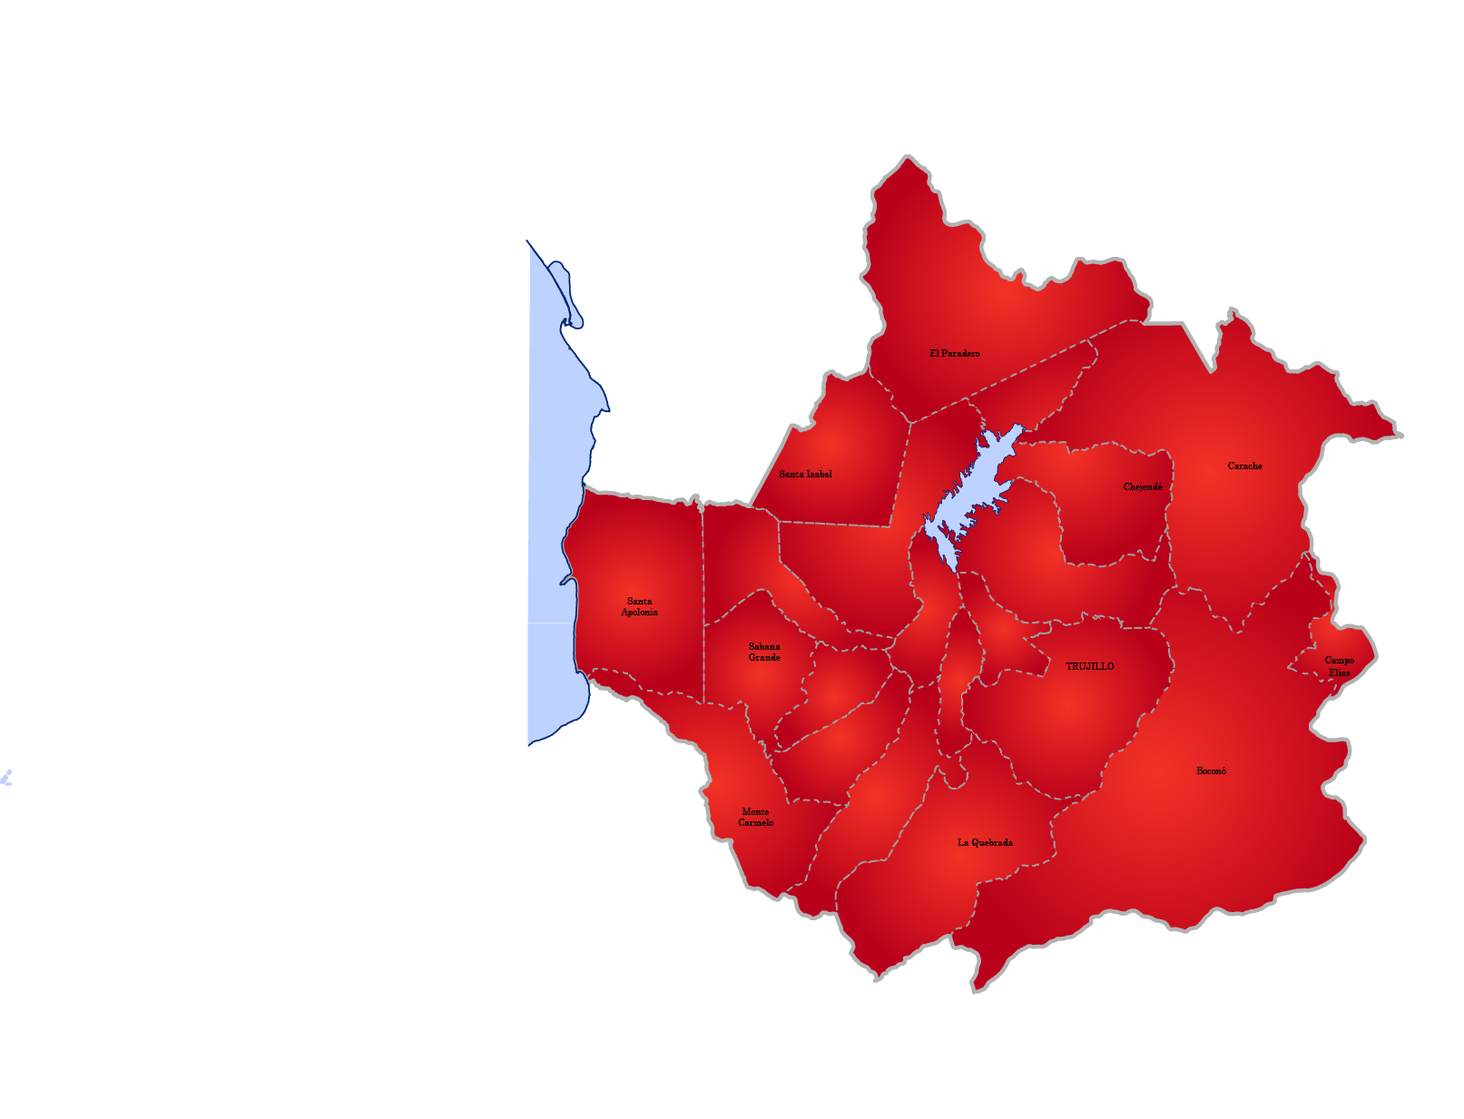
<style>
.page{position:relative;width:1464px;height:1119px;background:#ffffff}
.page>*{position:absolute;margin:0}
.t1{font:9px "CenturySchoolbook";color:#000000}
</style>
<div class="page">
<p class="t1" style="left:930px;top:350px;width:50px;height:7px">El Paradero</p>
<p class="t1" style="left:780px;top:470px;width:52px;height:8px">Santa Isabel</p>
<p class="t1" style="left:1228px;top:462px;width:35px;height:7px">Carache</p>
<p class="t1" style="left:1124px;top:483px;width:39px;height:9px">Chejendé</p>
<p class="t1" style="left:627px;top:597px;width:26px;height:8px">Santa</p>
<p class="t1" style="left:621px;top:608px;width:37px;height:9px">Apolonia</p>
<p class="t1" style="left:749px;top:643px;width:32px;height:7px">Sabana</p>
<p class="t1" style="left:749px;top:654px;width:32px;height:7px">Grande</p>
<p class="t1" style="left:1066px;top:663px;width:49px;height:7px">TRUJILLO</p>
<p class="t1" style="left:1325px;top:656px;width:29px;height:9px">Campo</p>
<p class="t1" style="left:1329px;top:669px;width:22px;height:7px">Elías</p>
<p class="t1" style="left:1197px;top:767px;width:29px;height:7px">Boconó</p>
<p class="t1" style="left:743px;top:808px;width:26px;height:7px">Monte</p>
<p class="t1" style="left:738px;top:819px;width:35px;height:7px">Carmelo</p>
<p class="t1" style="left:958px;top:839px;width:56px;height:9px">La Quebrada</p>
</div>
